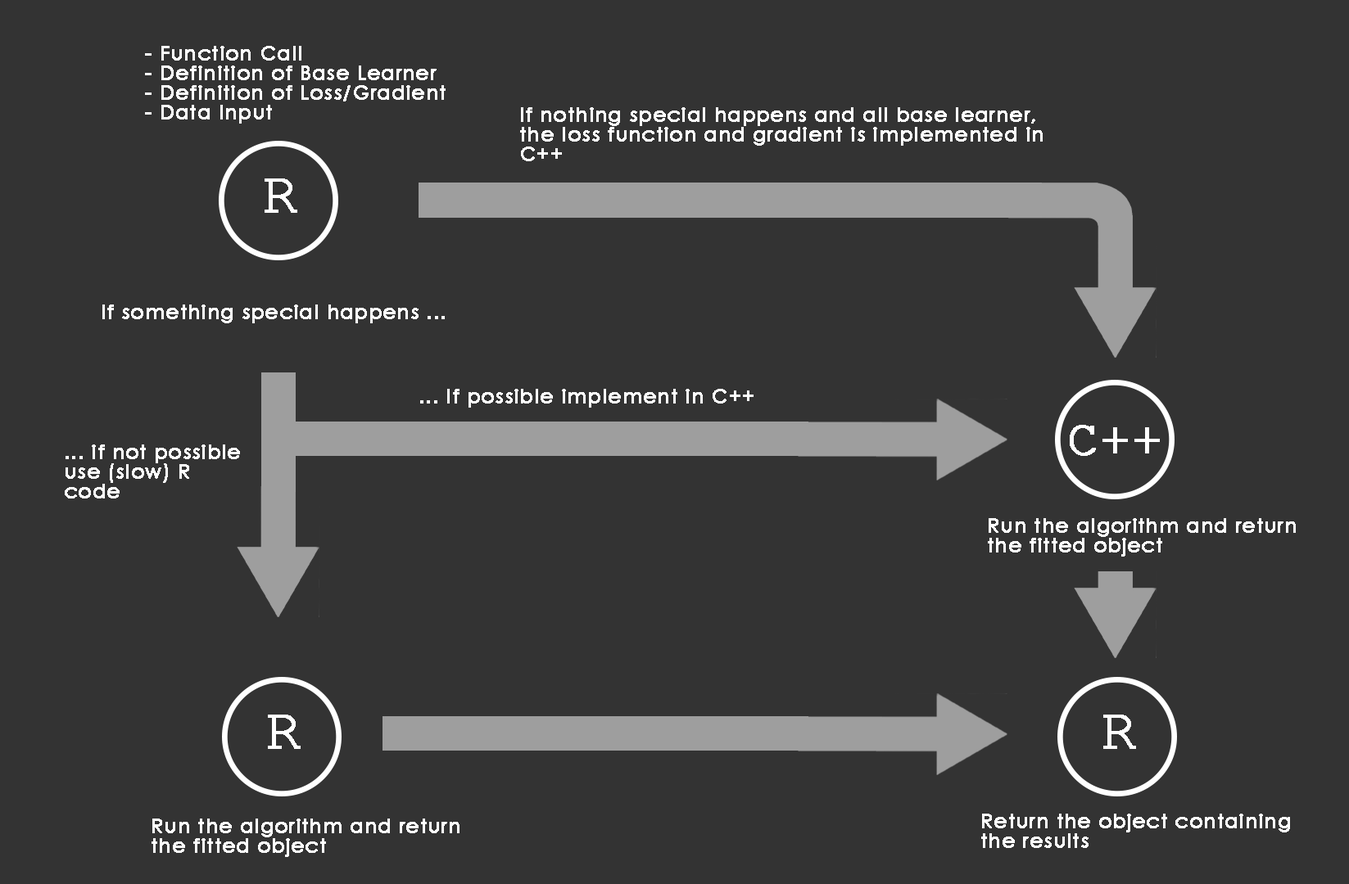
<style>
.page{position:relative;width:1349px;height:884px;background:#333333}
.page>*{position:absolute;margin:0}
.t1{font:19.7px/19.7px "CenturyGothic";letter-spacing:0.015em;color:#ffffff;font-weight:bold}
.t2{font:59px "CourierNewPSMT";letter-spacing:0.015em;color:#ffffff;font-weight:bold}
.t3{font:19.7px "CenturyGothic";letter-spacing:0.015em;color:#ffffff;font-weight:bold}
.t4{font:50.3px "CourierNewPSMT";letter-spacing:0.015em;color:#ffffff;font-weight:bold}
</style>
<div class="page">
<p class="t1" style="left:145px;top:46px;width:300px;height:78px">- Function Call<br>- Definition of Base Learner<br>- Definition of Loss/Gradient<br>- Data Input</p>
<p class="t1" style="left:520px;top:107px;width:522px;height:54px">If nothing special happens and all base learner, the loss function and gradient is implemented in C++</p>
<p class="t2" style="left:264px;top:178px;width:33px;height:35px">R</p>
<p class="t3" style="left:102px;top:305px;width:343px;height:18px">If something special happens ...</p>
<p class="t3" style="left:420px;top:389px;width:333px;height:19px">... If possible implement in C++</p>
<p class="t4" style="left:1069px;top:425px;width:90px;height:31px">C++</p>
<p class="t1" style="left:65px;top:445px;width:175px;height:54px">... if not possible use (slow) R code</p>
<p class="t1" style="left:987px;top:518px;width:308px;height:39px">Run the algorithm and return the fitted object</p>
<p class="t2" style="left:268px;top:715px;width:32px;height:34px">R</p>
<p class="t2" style="left:1103px;top:715px;width:33px;height:34px">R</p>
<p class="t1" style="left:151px;top:819px;width:308px;height:38px">Run the algorithm and return the fitted object</p>
<p class="t1" style="left:981px;top:814px;width:309px;height:34px">Return the object containing the results</p>
</div>
